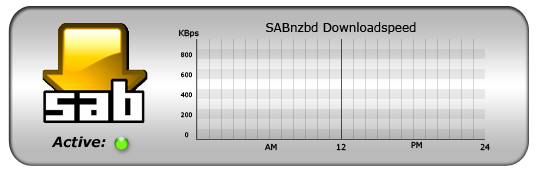
<style>
.page{position:relative;width:540px;height:170px}
.page>*{position:absolute;margin:0}
.t1{font:8px "Verdana";color:#000000}
.t2{font:12px "Verdana";color:#000000}
.t3{font:6px "Verdana";color:#000000}
.t4{font:14px "Verdana-BoldItalic";color:#000000}
</style>
<div class="page">
<p class="t1" style="left:179px;top:29px;width:20px;height:9px">KBps</p>
<p class="t2" style="left:266px;top:22px;width:150px;height:12px">SABnzbd Downloadspeed</p>
<p class="t3" style="left:181px;top:52px;width:11px;height:6px">800</p>
<p class="t3" style="left:181px;top:72px;width:11px;height:6px">600</p>
<p class="t3" style="left:180px;top:92px;width:12px;height:6px">400</p>
<p class="t3" style="left:181px;top:112px;width:11px;height:6px">200</p>
<p class="t4" style="left:51px;top:136px;width:55px;height:12px">Active:</p>
<p class="t3" style="left:185px;top:132px;width:4px;height:6px">0</p>
<p class="t1" style="left:265px;top:143px;width:12px;height:8px">AM</p>
<p class="t1" style="left:336px;top:143px;width:10px;height:8px">12</p>
<p class="t1" style="left:411px;top:141px;width:11px;height:8px">PM</p>
<p class="t1" style="left:480px;top:143px;width:10px;height:8px">24</p>
</div>
